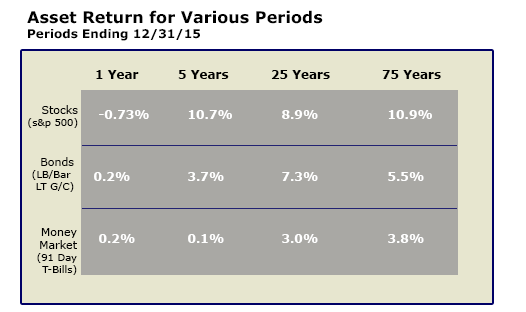
<style>
.page{position:relative;width:526px;height:312px;background:#a9a8a4}
.page>*{position:absolute;margin:0}
.t1{font:16px "Verdana-Bold";color:#000000}
.t2{font:12px "Verdana-Bold";color:#000000}
.t3{font:10px "Verdana";color:#000000}
.t4{font:11px "Verdana";color:#000000}
.t5{font:12px "Verdana-Bold";color:#ffffff}
</style>
<div class="page">
<p class="t1" style="left:27px;top:10px;width:296px;height:31px">Asset Return for Various Periods<br><span class="t2">Periods Ending 12/31/15</span></p>
<p class="t2" style="left:96px;top:70px;width:43px;height:9px">1 Year</p>
<p class="t2" style="left:178px;top:70px;width:51px;height:9px">5 Years</p>
<p class="t2" style="left:271px;top:70px;width:59px;height:9px">25 Years</p>
<p class="t2" style="left:382px;top:70px;width:59px;height:9px">75 Years</p>
<p class="t3" style="left:28px;top:105px;width:50px;height:23px;text-align:right"><span class="t4">Stocks<br></span>(s&amp;p 500)</p>
<p class="t5" style="left:99px;top:110px;width:50px;height:9px">-0.73%</p>
<p class="t5" style="left:188px;top:110px;width:44px;height:9px">10.7%</p>
<p class="t5" style="left:282px;top:110px;width:36px;height:9px">8.9%</p>
<p class="t5" style="left:388px;top:110px;width:44px;height:9px">10.9%</p>
<p class="t3" style="left:32px;top:157px;width:42px;height:35px;text-align:right"><span class="t4">Bonds<br></span>(LB/Bar <br>LT G/C)</p>
<p class="t5" style="left:94px;top:172px;width:36px;height:9px">0.2%</p>
<p class="t5" style="left:188px;top:172px;width:36px;height:9px">3.7%</p>
<p class="t5" style="left:282px;top:172px;width:36px;height:9px">7.3%</p>
<p class="t5" style="left:388px;top:172px;width:36px;height:9px">5.5%</p>
<p class="t3" style="left:37px;top:228px;width:40px;height:47px;text-align:right"><span class="t4">Money<br>Market<br></span>(91 Day<br>T-Bills)</p>
<p class="t5" style="left:99px;top:234px;width:36px;height:9px">0.2%</p>
<p class="t5" style="left:188px;top:234px;width:36px;height:9px">0.1%</p>
<p class="t5" style="left:282px;top:234px;width:36px;height:9px">3.0%</p>
<p class="t5" style="left:388px;top:234px;width:36px;height:9px">3.8%</p>
</div>
